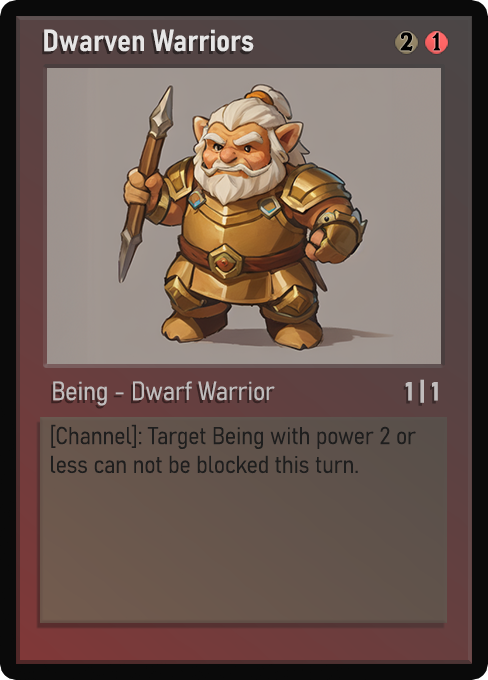
<style>
.page{position:relative;width:488px;height:680px}
.page>*{position:absolute;margin:0}
.t1{font:30px "Bahnschrift-SemiBoldSemiCondensed";color:#f2f2f2;font-weight:bold}
.t2{font:25px "WTRRoycroft";color:#000000;font-weight:bold;scale:1.09 1}
.t3{font:26px "Bahnschrift-LightSemiCondensed";color:#c8c8c8;font-weight:bold}
.t4{font:26px "Bahnschrift-BoldSemiCondensed";color:#c1bdbd;font-weight:bold}
.t5{font:24px "Bahnschrift-LightSemiCondensed";color:#1e1e1e;font-weight:bold}
</style>
<div class="page">
<p class="t1" style="left:44px;top:29px;width:210px;height:23px;opacity:0.9">Dwarven Warriors</p>
<p class="t2" style="left:400px;top:32px;width:13px;height:19px">2</p>
<p class="t2" style="left:432px;top:32px;width:9px;height:19px">1</p>
<p class="t3" style="left:53px;top:381px;width:222px;height:25px;opacity:0.9">Being - Dwarf Warrior</p>
<p class="t4" style="left:405px;top:379px;width:33px;height:24px">1 | 1</p>
<p class="t5" style="left:51px;top:424px;width:365px;height:50px">[Channel]: Target Being with power 2 or less can not be blocked this turn.</p>
</div>
